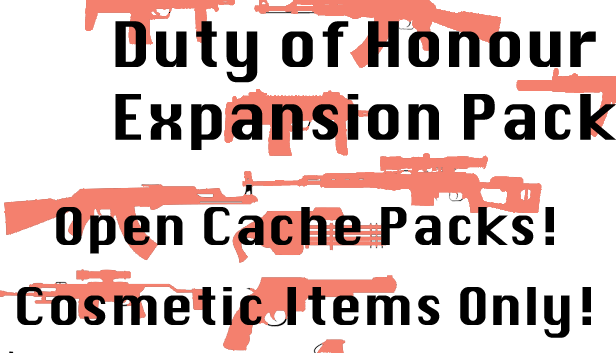
<style>
.page{position:relative;width:616px;height:353px;background:#ffffff}
.page>*{position:absolute;margin:0}
.t1{font:60.6px "Silom";color:#000000}
.t2{font:50.6px "Silom";color:#000000}
</style>
<div class="page">
<p class="t1" style="left:115px;top:21px;width:501px;height:129px">Duty of Honour <br>Expansion Pack</p>
<p class="t2" style="left:56px;top:207px;width:498px;height:47px">Open Cache Packs!</p>
<p class="t2" style="left:17px;top:287px;width:574px;height:51px">Cosmetic Items Only!</p>
</div>
